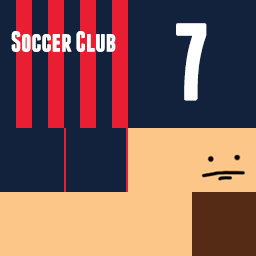
<style>
.page{position:relative;width:256px;height:256px;background:#13223c}
.page>*{position:absolute;margin:0}
.t1{font:109.7px "Franchise-Bold";color:#ffffff}
.t2{font:29px "Franchise-Bold";color:#ffffff}
</style>
<div class="page">
<p class="t1" style="left:176px;top:23px;width:31px;height:78px">7</p>
<p class="t2" style="left:11px;top:31px;width:105px;height:21px">Soccer Club</p>
</div>
